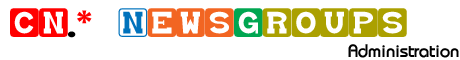
<style>
.page{position:relative;width:460px;height:60px;background:#ffffff}
.page>*{position:absolute;margin:0}
.t1{font:24px "babybloc";color:#aba000}
.t2{font:24px "babybloc";color:#ff0000}
.t3{font:24px "BroadwayBT-Regular";color:#000000}
.t4{font:36px "CenturyGothic-Bold";color:#ff0000}
.t5{font:24px "babybloc";color:#0072bc}
.t6{font:24px "babybloc";color:#f26522}
.t7{font:24px "babybloc";color:#00a651}
.t8{font:18px "BiminiBold";color:#000000}
</style>
<div class="page">
<p class="t1" style="left:10px;top:8px;width:397px;height:30px"><span class="t2">cn</span><span class="t3">.</span><span class="t4">*   </span><span class="t5">N</span><span class="t6">ews</span><span class="t7">g</span>roups</p>
<p class="t8" style="left:348px;top:44px;width:111px;height:14px">Administration</p>
</div>
